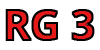
<style>
.page{position:relative;width:100px;height:50px;background:#ffffff}
.page>*{position:absolute;margin:0}
.t1{font:41.7px "NotoSans-Bold";color:#e41a1a}
</style>
<div class="page">
<p class="t1" style="left:6px;top:10px;width:88px;height:30px">RG 3</p>
</div>
